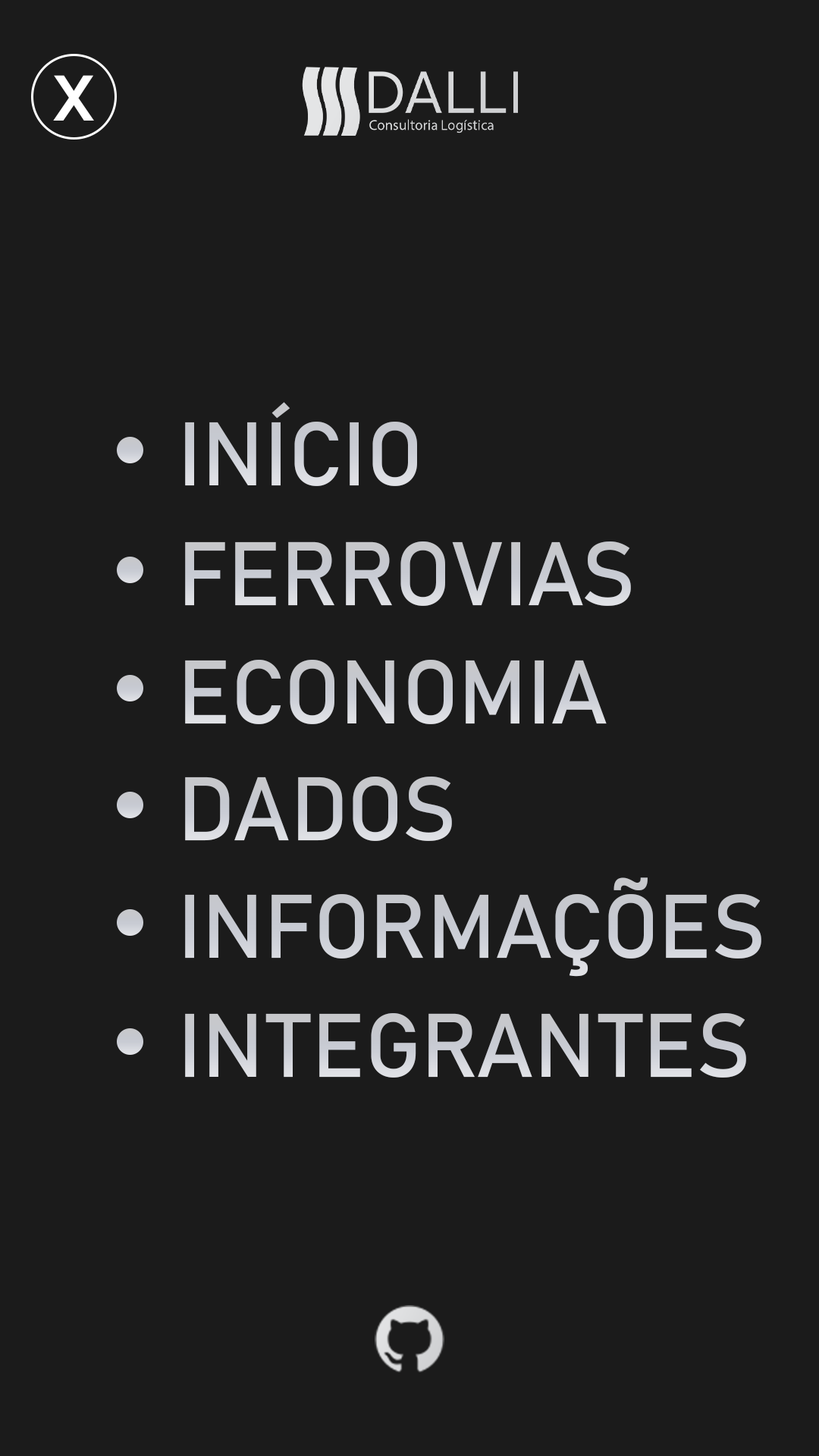
<style>
.page{position:relative;width:819px;height:1456px;background:#1b1b1b}
.page>*{position:absolute;margin:0}
.t1{font:88.5px "Bahnschrift";color:#ffffff}
.t2{font:88.5px "Bahnschrift";color:#cccfd6}
.t3{font:88.5px "Bahnschrift";color:#c8cbd3}
.t4{font:88.5px "Bahnschrift";color:#c9ccd4}
</style>
<div class="page">
<p class="t1" style="left:53px;top:75px;width:41px;height:46px">x</p>
<p class="t2" style="left:185px;top:402px;width:232px;height:84px">INÍCIO</p>
<p class="t3" style="left:185px;top:541px;width:446px;height:65px">FERROVIAS</p>
<p class="t3" style="left:185px;top:660px;width:422px;height:64px">ECONOMIA</p>
<p class="t4" style="left:185px;top:777px;width:267px;height:64px">DADOS</p>
<p class="t3" style="left:185px;top:877px;width:576px;height:100px">INFORMAÇÕES</p>
<p class="t3" style="left:185px;top:1013px;width:561px;height:65px">INTEGRANTES</p>
</div>
